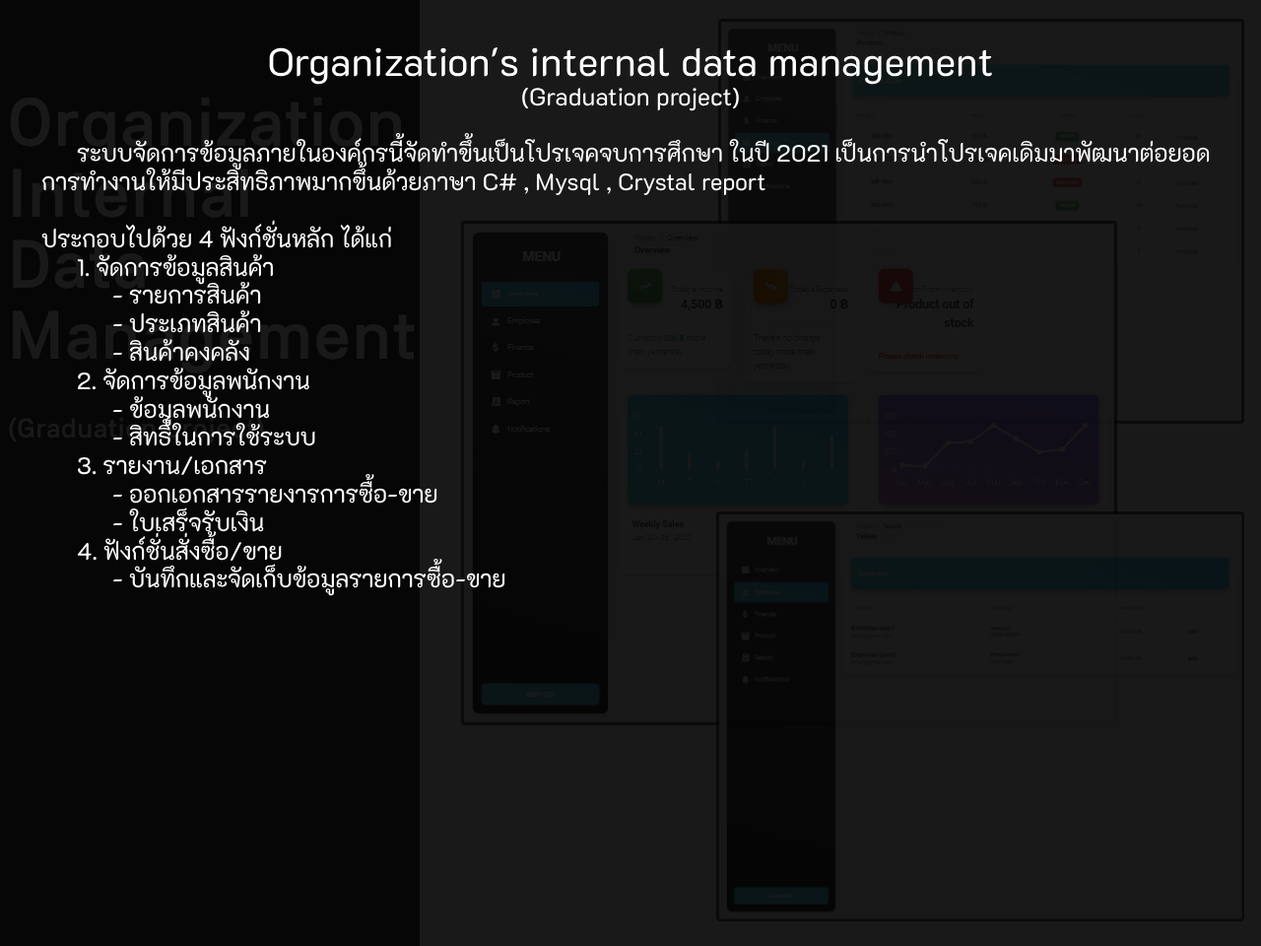
<style>
.page{position:relative;width:1261px;height:946px;background:#060606}
.page>*{position:absolute;margin:0}
.t1{font:23.6px "K2D-Regular";color:#ffffff}
.t2{font:39.4px "K2D-Regular";color:#ffffff}
.t3{font:24.6px "K2D-Regular";color:#ffffff}
</style>
<div class="page">
<p class="t1" style="left:41px;top:47px;width:1169px;height:549px;text-align:center"><span class="t2">Organization's internal data management<br></span><span class="t3">(Graduation project)<br><br> </span>ระบบจัดการข้อมูลภายในองค์กรนี้จัดทำขึ้นเป็นโปรเจคจบการศึกษา ในปี 2021 เป็นการนำโปรเจคเดิมมาพัฒนาต่อยอด การทำงานให้มีประสิทธิภาพมากขึ้นด้วยภาษา C# , Mysql , Crystal report<br><br>ประกอบไปด้วย 4 ฟังก์ชั่นหลัก ได้แก่<br> 1. จัดการข้อมูลสินค้า<br>  - รายการสินค้า<br>  - ประเภทสินค้า<br>  - สินค้าคงคลัง<br> 2. จัดการข้อมูลพนักงาน<br>  - ข้อมูลพนักงาน<br>  - สิทธิ์ในการใช้ระบบ<br> 3. รายงาน/เอกสาร<br>  - ออกเอกสารรายงารการซื้อ-ขาย<br>  - ใบเสร็จรับเงิน<br> 4. ฟังก์ชั่นสั่งซื้อ/ขาย<br>  - บันทึกและจัดเก็บข้อมูลรายการซื้อ-ขาย</p>
</div>
